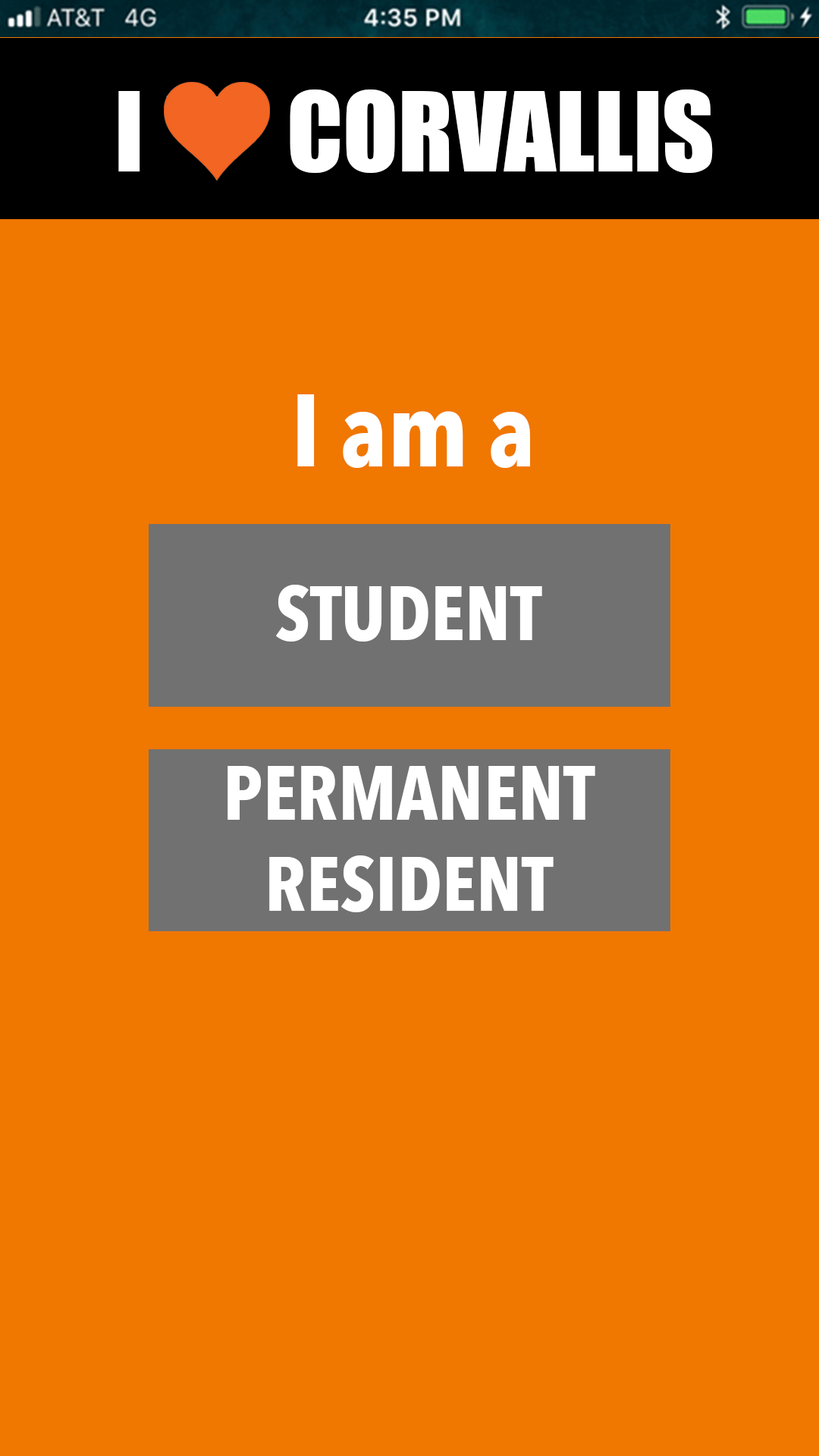
<style>
.page{position:relative;width:819px;height:1456px;background:#f07700}
.page>*{position:absolute;margin:0}
.t1{font:101.4px "Impact";color:#ffffff}
.t2{font:101.4px "AvenirNextCondensed-Bold";color:#ffffff}
.t3{font:76px "AvenirNextCondensed-Bold";color:#ffffff}
</style>
<div class="page">
<p class="t1" style="left:118px;top:89px;width:595px;height:84px">I        CORVALLIS</p>
<p class="t2" style="left:297px;top:394px;width:233px;height:74px">I am a</p>
<p class="t3" style="left:276px;top:585px;width:266px;height:57px">STUDENT</p>
<p class="t3" style="left:227px;top:766px;width:368px;height:146px;text-align:center">PERMANENT<br>RESIDENT</p>
</div>
